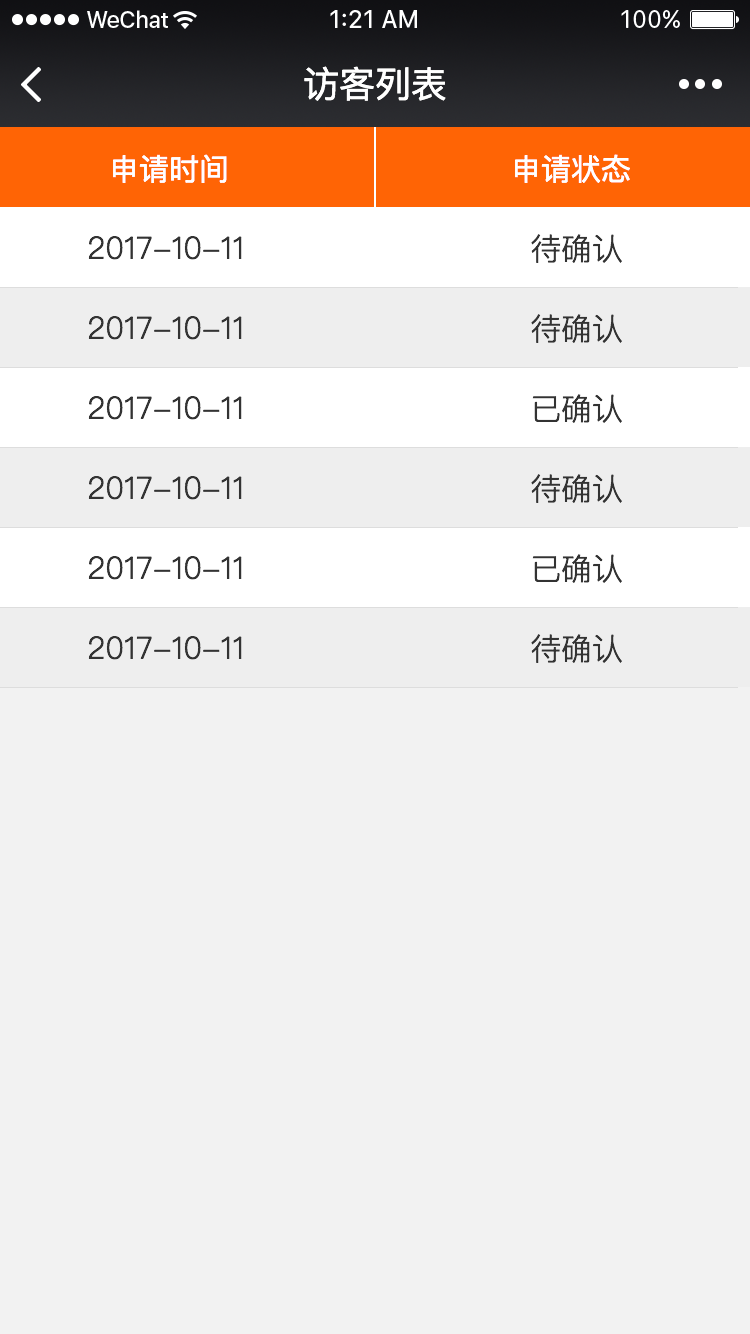
<style>
.page{position:relative;width:750px;height:1334px;background:#f2f2f2}
.page>*{position:absolute;margin:0}
.t1{font:36px "PingFangSC-Regular";color:#ffffff}
.t2{font:30px "PingFangSC-Regular";color:#ffffff}
.t3{font:30.7px "PingFangSC-Light";color:#333333}
</style>
<div class="page">
<p class="t1" style="left:304px;top:66px;width:142px;height:35px">访客列表</p>
<p class="t2" style="left:113px;top:154px;width:114px;height:29px">申请时间</p>
<p class="t2" style="left:515px;top:154px;width:115px;height:29px">申请状态</p>
<p class="t3" style="left:88px;top:236px;width:154px;height:24px">2017-10-11</p>
<p class="t3" style="left:531px;top:234px;width:91px;height:29px">待确认</p>
<p class="t3" style="left:88px;top:316px;width:154px;height:24px">2017-10-11</p>
<p class="t3" style="left:531px;top:314px;width:91px;height:29px">待确认</p>
<p class="t3" style="left:88px;top:396px;width:154px;height:24px">2017-10-11</p>
<p class="t3" style="left:532px;top:394px;width:90px;height:29px">已确认</p>
<p class="t3" style="left:88px;top:476px;width:154px;height:24px">2017-10-11</p>
<p class="t3" style="left:531px;top:474px;width:91px;height:29px">待确认</p>
<p class="t3" style="left:88px;top:556px;width:154px;height:24px">2017-10-11</p>
<p class="t3" style="left:532px;top:554px;width:90px;height:29px">已确认</p>
<p class="t3" style="left:88px;top:636px;width:154px;height:24px">2017-10-11</p>
<p class="t3" style="left:531px;top:634px;width:91px;height:29px">待确认</p>
</div>
